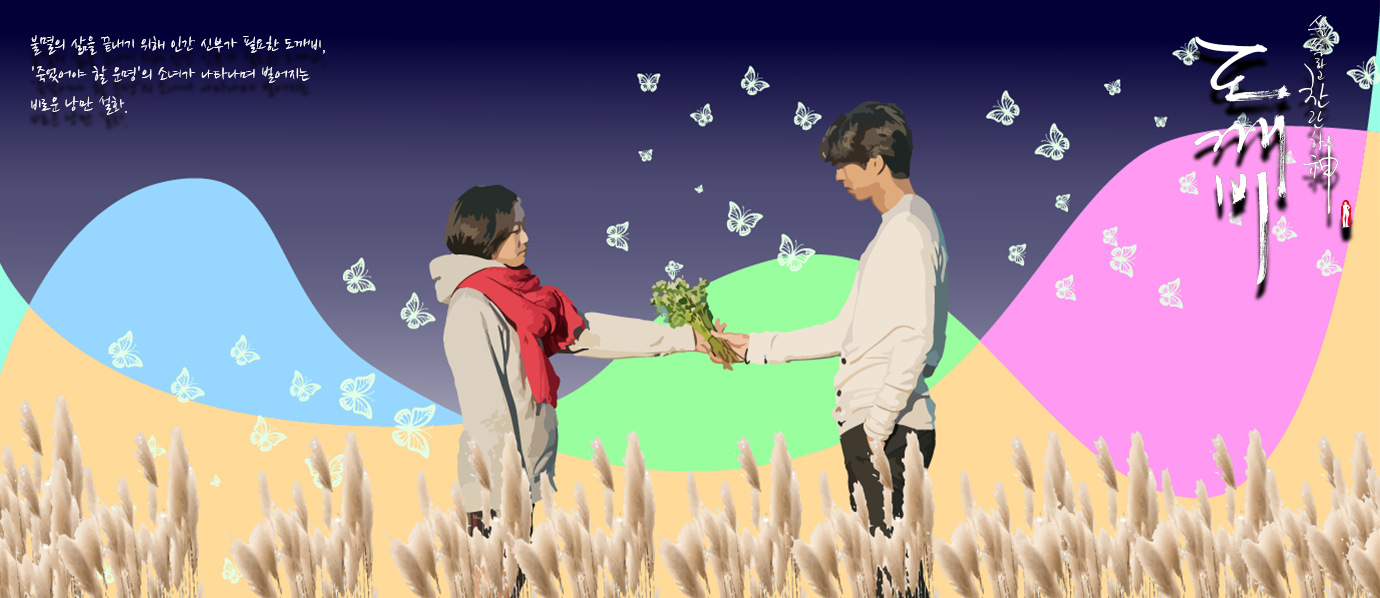
<style>
.page{position:relative;width:1380px;height:598px}
.page>*{position:absolute;margin:0}
.t1{font:20px/30px "NanumBrush";color:#ffffff}
</style>
<div class="page">
<p class="t1" style="left:30px;top:35px;width:295px;height:80px">불멸의 삶을 끝내기 위해 인간 신부가 필요한 도깨비,<br>'죽었어야 할 운명'의 소녀가 나타나며 벌어지는<br>비로운 낭만 설화.</p>
</div>
